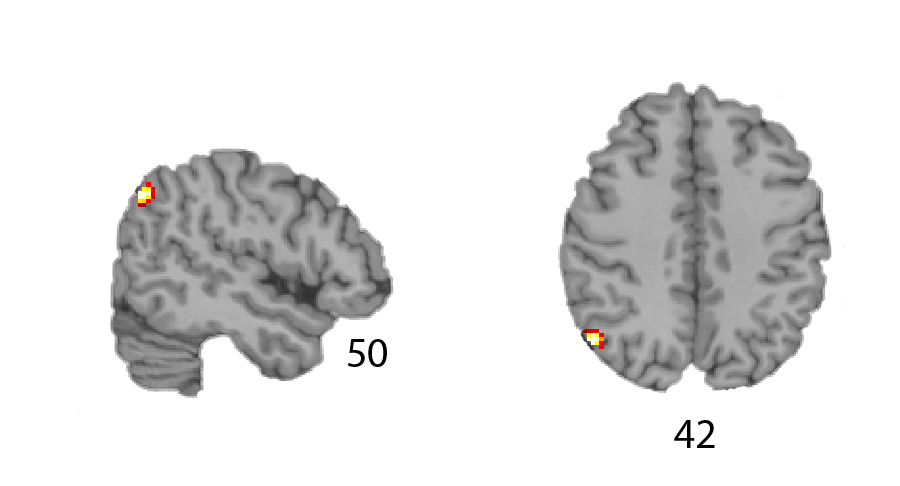
<style>
.page{position:relative;width:900px;height:486px;background:#ffffff}
.page>*{position:absolute;margin:0}
.t1{font:41.7px "MyriadPro-Regular";color:#000000}
</style>
<div class="page">
<p class="t1" style="left:348px;top:339px;width:39px;height:28px">50</p>
<p class="t1" style="left:674px;top:420px;width:41px;height:28px">42</p>
</div>
